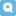
<style>
.page{position:relative;width:16px;height:16px;background:#61b3e6}
.page>*{position:absolute;margin:0}
.t1{font:12px "Arial-Black";letter-spacing:0.025em;color:#ffffff}
</style>
<div class="page">
<p class="t1" style="left:3px;top:2px;width:10px;height:11px">Q</p>
</div>
